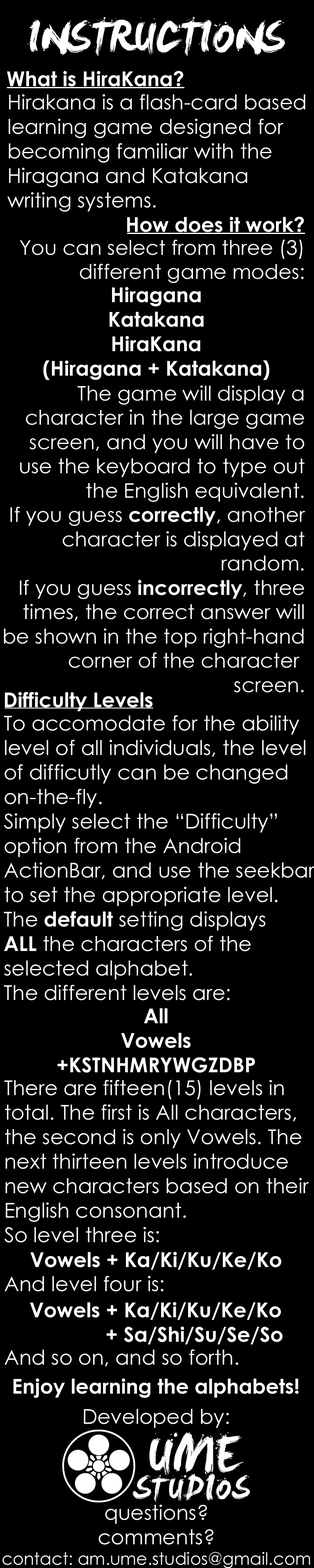
<style>
.page{position:relative;width:314px;height:1568px;background:#000000}
.page>*{position:absolute;margin:0}
.t1{font:40.8px "LeviReBrushed";color:#ffffff}
.t2{font:20.4px "CenturyGothic-Bold";color:#ffffff}
.t3{font:20.4px "CenturyGothic";color:#ffffff}
.t4{font:20.2px "CenturyGothic";color:#ffffff}
.t5{font:20.2px "CenturyGothic-Bold";color:#ffffff}
.t6{font:17px "CenturyGothic";color:#ffffff}
</style>
<div class="page">
<p class="t1" style="left:27px;top:17px;width:258px;height:39px">INSTRUCTIONS</p>
<p class="t2" style="left:7px;top:71px;width:176px;height:16px">What is HiraKana?</p>
<p class="t3" style="left:7px;top:94px;width:298px;height:118px">Hirakana is a flash-card based<br>learning game designed for<br>becoming familiar with the<br>Hiragana and Katakana <br>writing systems.</p>
<p class="t2" style="left:127px;top:216px;width:177px;height:16px">How does it work?</p>
<p class="t4" style="left:4px;top:240px;width:301px;height:453px;text-align:right">You can select from three (3)<br>different game modes:<br><br><br><br><br>The game will display a<br>character in the large game<br>screen, and you will have to<br>use the keyboard to type out<br>the English equivalent.<br>If you guess <span class="t5">correctly</span>, another<br>character is displayed at<br>random.<br>If you guess <span class="t5">incorrectly</span>, three<br>times, the correct answer will<br>be shown in the top right-hand<br>corner of the character <br>screen.</p>
<p class="t2" style="left:5px;top:692px;width:147px;height:19px">Difficulty Levels</p>
<p class="t2" style="left:57px;top:1008px;width:198px;height:65px;text-align:center">All<br>Vowels<br>+KSTNHMRYWGZDBP</p>
<p class="t3" style="left:4px;top:1080px;width:305px;height:287px">There are fifteen(15) levels in<br>total. The first is All characters,<br>the second is only Vowels. The<br>next thirteen levels introduce<br>new characters based on their<br>English consonant. <br>So level three is:<br><br>And level four is:<br><br><br>And so on, and so forth.</p>
<p class="t2" style="left:30px;top:1252px;width:251px;height:18px">Vowels + Ka/Ki/Ku/Ke/Ko</p>
<p class="t2" style="left:30px;top:1302px;width:252px;height:43px">Vowels + Ka/Ki/Ku/Ke/Ko<br>         + Sa/Shi/Su/Se/So</p>
<p class="t2" style="left:13px;top:1378px;width:285px;height:20px">Enjoy learning the alphabets!</p>
<p class="t3" style="left:84px;top:1409px;width:145px;height:19px">Developed by:</p>
<p class="t6" style="left:2px;top:1504px;width:308px;height:64px;text-align:center"><span class="t3">questions?<br>comments?<br></span>contact: am.ume.studios@gmail.com</p>
</div>
